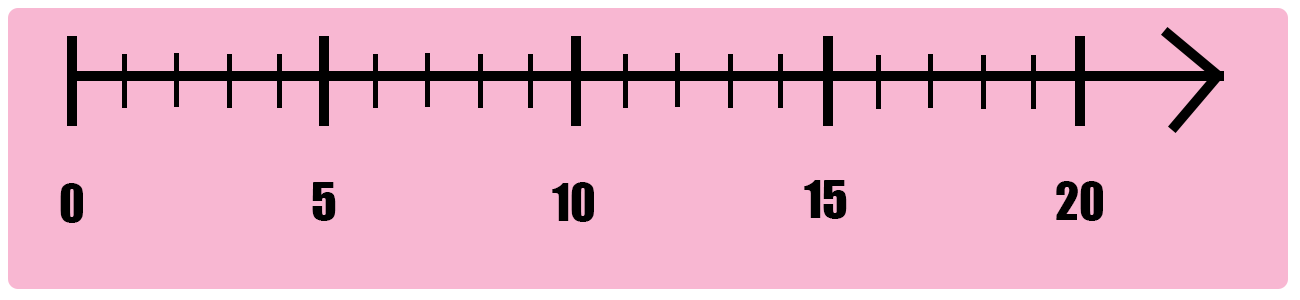
<style>
.page{position:relative;width:1300px;height:300px;background:#f8b7d2}
.page>*{position:absolute;margin:0}
.t1{font:48px "Impact";color:#000000}
</style>
<div class="page">
<p class="t1" style="left:60px;top:183px;width:23px;height:40px">0</p>
<p class="t1" style="left:312px;top:182px;width:24px;height:39px">5</p>
<p class="t1" style="left:552px;top:182px;width:42px;height:40px">10</p>
<p class="t1" style="left:804px;top:180px;width:43px;height:39px">15</p>
<p class="t1" style="left:1056px;top:181px;width:47px;height:40px">20</p>
</div>
